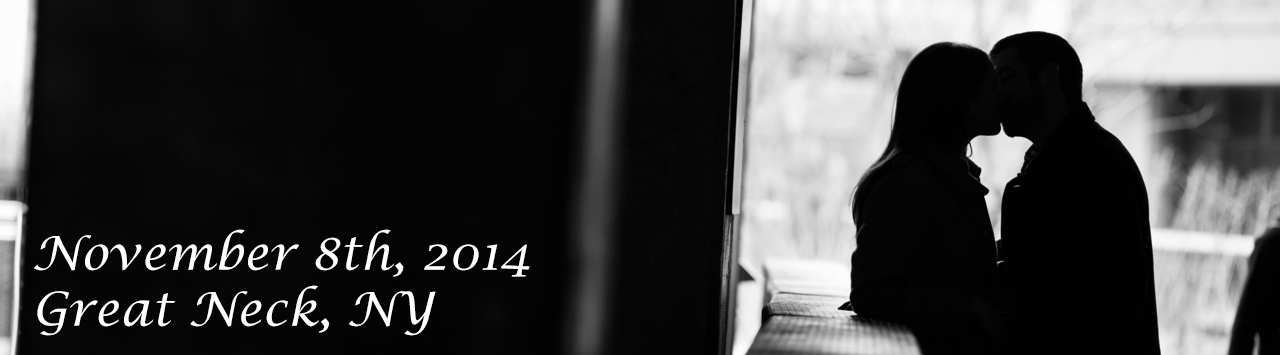
<style>
.page{position:relative;width:1280px;height:355px}
.page>*{position:absolute;margin:0}
.t1{font:46.7px "LucidaCalligraphy-Italic";letter-spacing:0.005em;color:#ffffff}
</style>
<div class="page">
<p class="t1" style="left:34px;top:229px;width:496px;height:107px">November 8th, 2014<br>Great Neck, NY</p>
</div>
